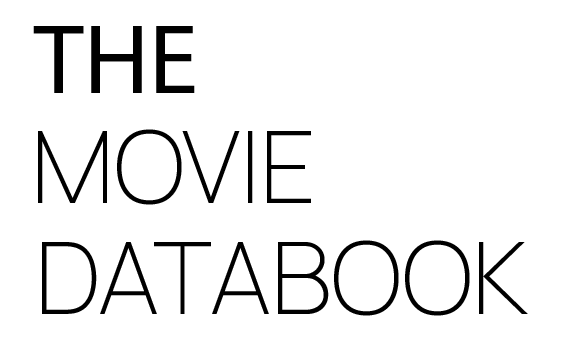
<style>
.page{position:relative;width:574px;height:338px;background:#ffffff}
.page>*{position:absolute;margin:0}
.t1{font:100px "MyriadPro-Regular";color:#000000}
.t2{font:100px "Manrope-ExtraLight";color:#000000}
</style>
<div class="page">
<p class="t1" style="left:33px;top:26px;width:162px;height:67px">THE</p>
<p class="t2" style="left:38px;top:129px;width:273px;height:76px">MOVIE</p>
<p class="t2" style="left:42px;top:240px;width:486px;height:76px">DATABOOK</p>
</div>
